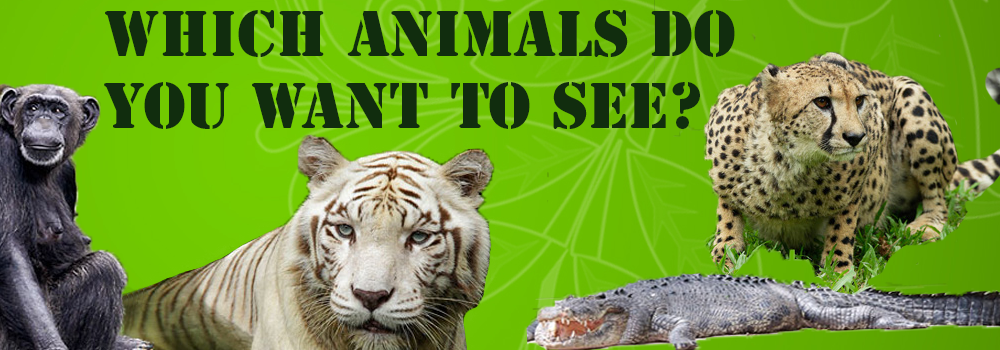
<style>
.page{position:relative;width:1000px;height:350px}
.page>*{position:absolute;margin:0}
.t1{font:60px "StencilStd";color:#112d0e}
</style>
<div class="page">
<p class="t1" style="left:104px;top:10px;width:631px;height:119px">Which Animals do<br>you want to see?</p>
</div>
